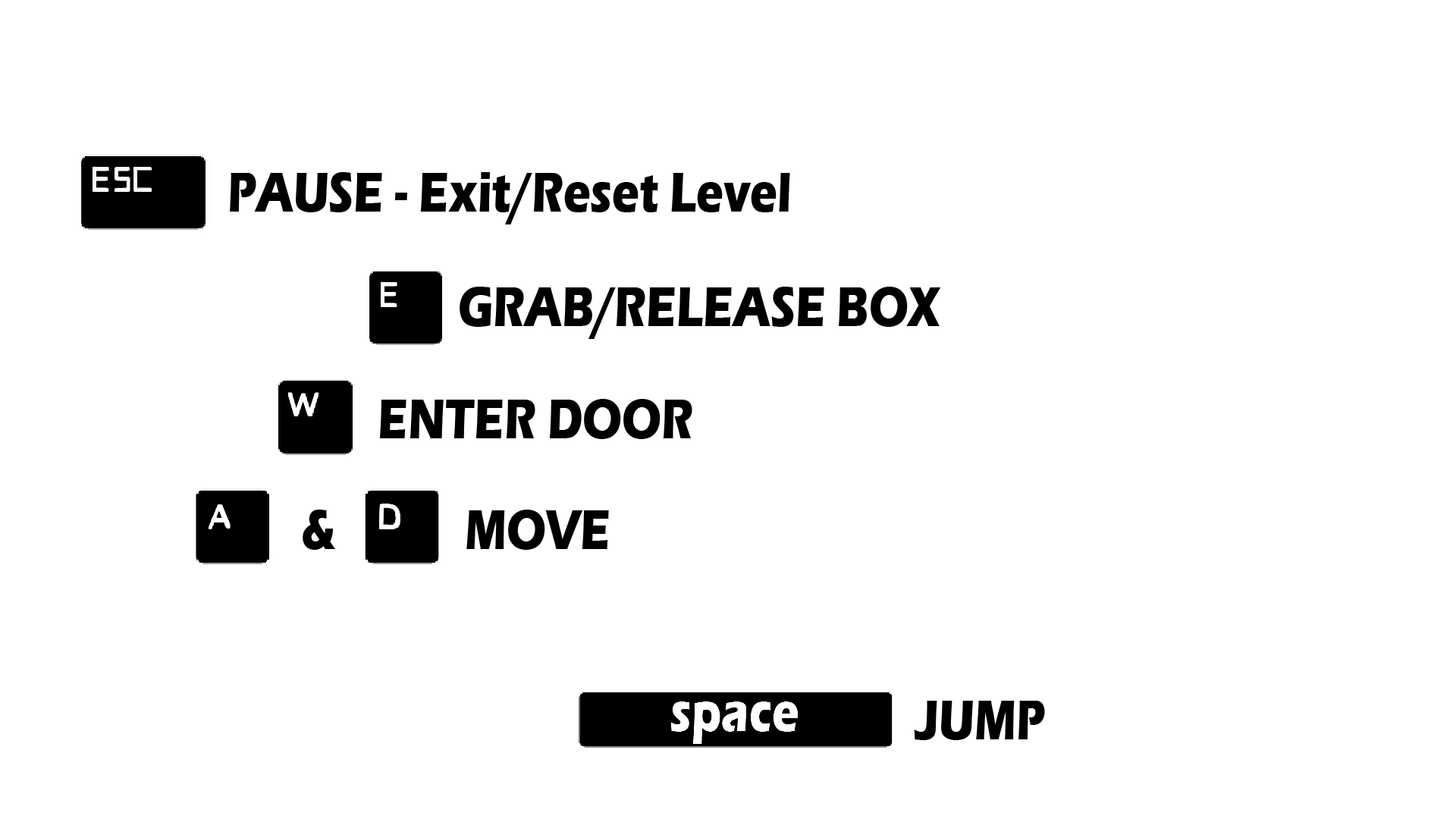
<style>
.page{position:relative;width:1456px;height:819px;background:#ffffff}
.page>*{position:absolute;margin:0}
.t1{font:57.8px "ErasITC-Bold";color:#000000;scale:0.79 1}
</style>
<div class="page">
<p class="t1" style="left:230px;top:172px;width:560px;height:52px">PAUSE - Exit/Reset Level</p>
<p class="t1" style="left:460px;top:287px;width:480px;height:52px">GRAB/RELEASE BOX</p>
<p class="t1" style="left:379px;top:399px;width:313px;height:40px">ENTER DOOR</p>
<p class="t1" style="left:303px;top:510px;width:306px;height:40px">&amp;      MOVE</p>
<p class="t1" style="left:914px;top:701px;width:131px;height:39px">JUMP</p>
</div>
